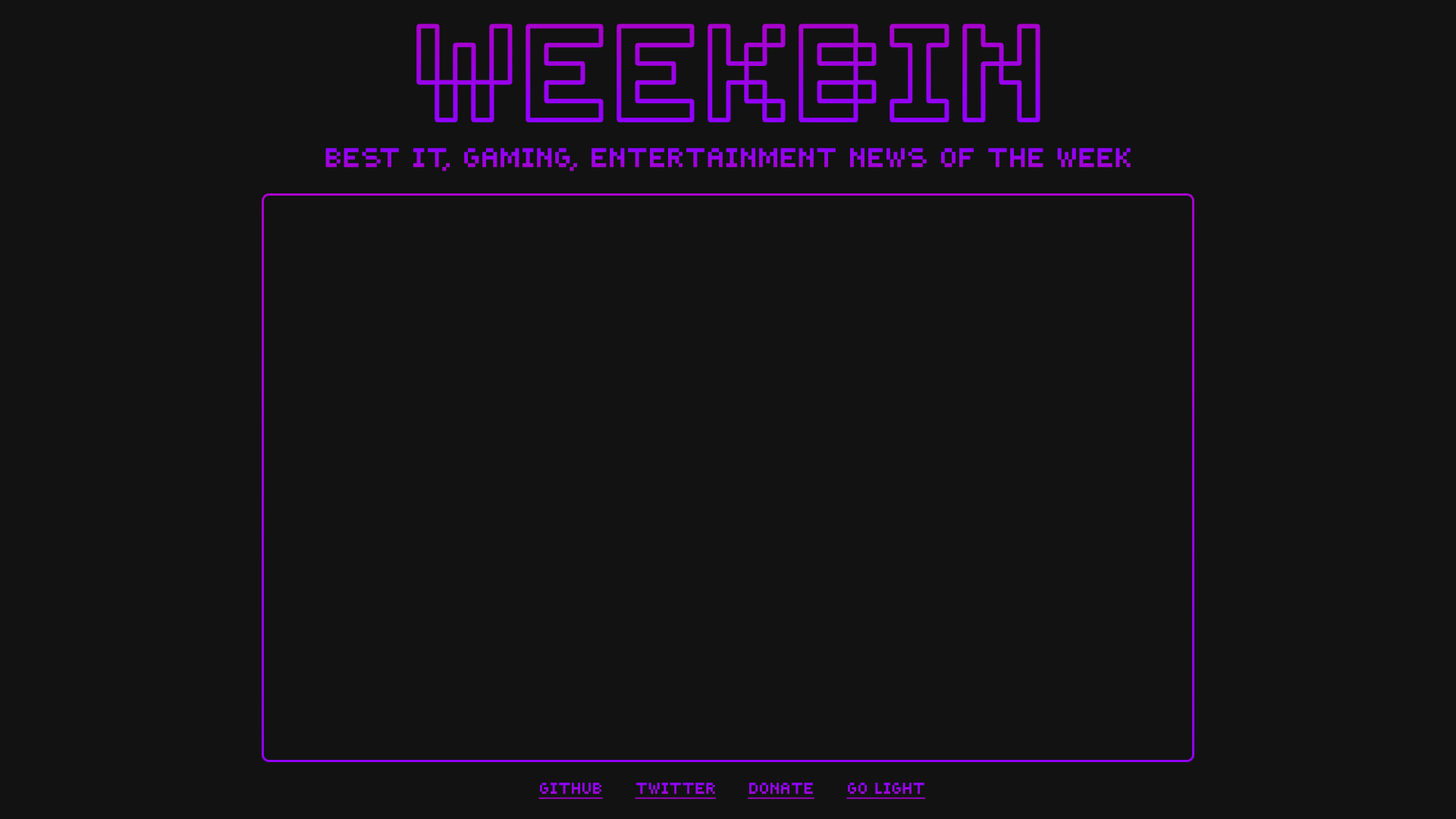
<style>
.page{position:relative;width:1456px;height:819px;background:#121212}
.page>*{position:absolute;margin:0}
.t1{font:18.7px "FE5Cent-Regular";color:#9901ec;text-transform:uppercase}
.t2{font:10.9px "FE5Cent-Regular";color:#9901ed;text-transform:uppercase;text-decoration:underline}
.t3{font:10.9px "FE5Cent-Regular";color:#9800ee;text-transform:uppercase;text-decoration:underline}
.t4{font:10.9px "FE5Cent-Regular";color:#9901eb;text-transform:uppercase;text-decoration:underline}
</style>
<div class="page">
<p class="t1" style="left:325px;top:148px;width:806px;height:23px">BEST IT, Gaming, entertainment NEWS OF THE WEEK</p>
<p class="t2" style="left:538px;top:783px;width:65px;height:16px">GItHub</p>
<p class="t3" style="left:635px;top:783px;width:81px;height:16px">twitter</p>
<p class="t2" style="left:748px;top:783px;width:66px;height:16px">Donate</p>
<p class="t4" style="left:846px;top:783px;width:80px;height:16px">GO LIGHT</p>
</div>
